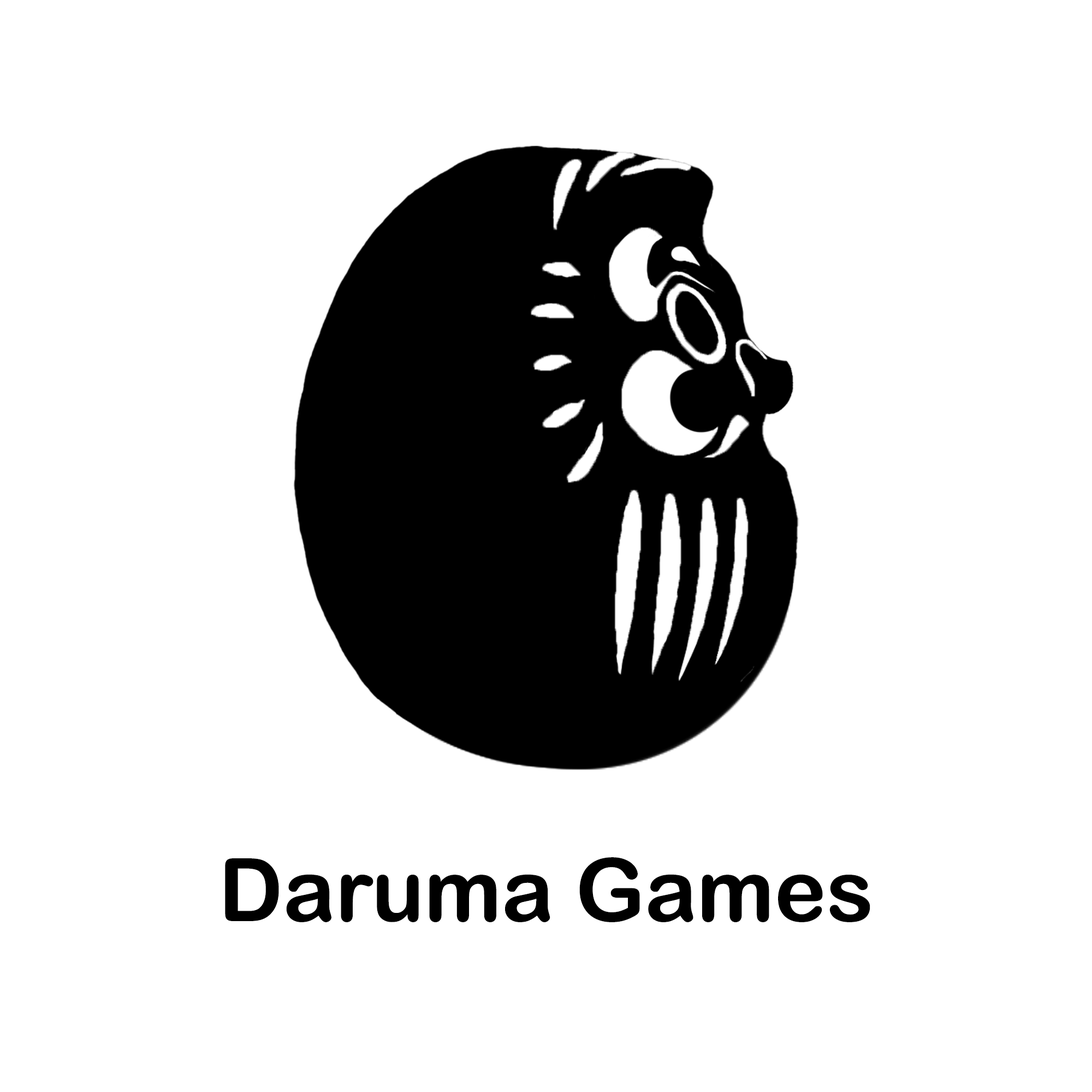
<style>
.page{position:relative;width:1092px;height:1092px;background:#ffffff}
.page>*{position:absolute;margin:0}
.t1{font:87.5px "ArialRoundedMTBold";color:#000000}
</style>
<div class="page">
<p class="t1" style="left:225px;top:857px;width:645px;height:65px">Daruma Games</p>
</div>
